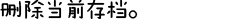
<style>
.page{position:relative;width:238px;height:19px;background:#ffffff}
.page>*{position:absolute;margin:0}
.t1{font:24px "¢è?";color:#000000}
</style>
<div class="page">
<p class="t1" style="left:0px;top:0px;width:138px;height:19px">删除当前存档。</p>
</div>
